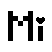
<style>
.page{position:relative;width:52px;height:52px;background:#ffffff}
.page>*{position:absolute;margin:0}
.t1{font:25px "Pixeled";color:#000000}
</style>
<div class="page">
<p class="t1" style="left:8px;top:11px;width:35px;height:30px">Mi</p>
</div>
